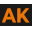
<style>
.page{position:relative;width:32px;height:32px;background:#1a1a1a}
.page>*{position:absolute;margin:0}
.t1{font:20.2px "Montserrat-Bold";letter-spacing:0.01em;color:#eb7608;scale:0.88 1}
</style>
<div class="page">
<p class="t1" style="left:2px;top:8px;width:28px;height:15px">AK</p>
</div>
